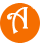
<style>
.page{position:relative;width:40px;height:43px;background:#f56e00}
.page>*{position:absolute;margin:0}
.t1{font:30px "Harrington";letter-spacing:0.01em;color:#ffffff;font-weight:bold}
</style>
<div class="page">
<p class="t1" style="left:7px;top:7px;width:21px;height:27px">A</p>
</div>
